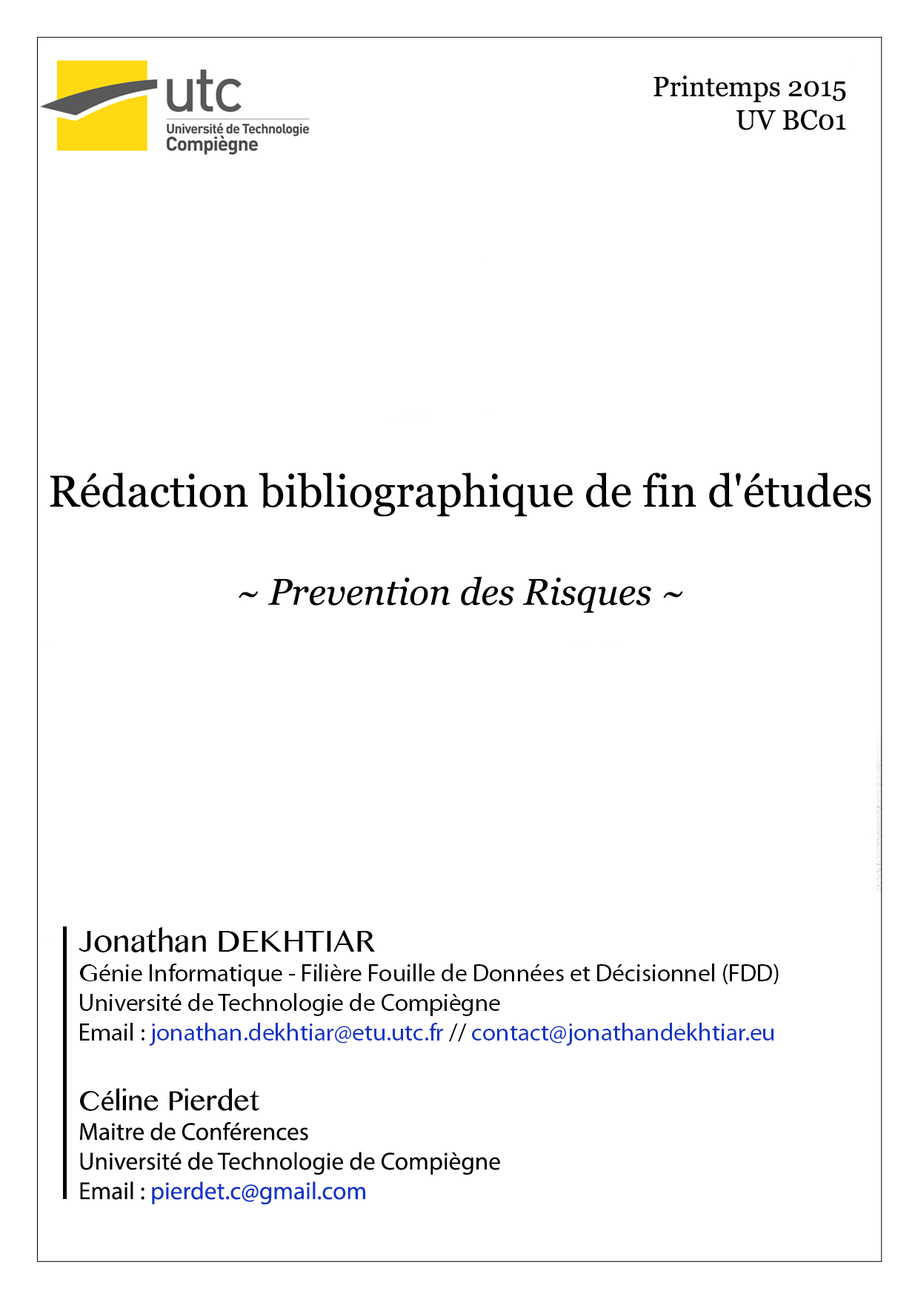
<style>
.page{position:relative;width:918px;height:1299px;background:#ffffff}
.page>*{position:absolute;margin:0}
.t1{font:27.8px "Georgia";color:#000000}
.t2{font:44.8px "Georgia";color:#000000}
.t3{font:37px "Georgia-Italic";color:#000000}
.t4{font:24.7px "MyriadPro-Regular";color:#000000}
.t5{font:30.9px "BanglaMN";color:#000000}
.t6{font:24.7px "BanglaMN";color:#000000}
.t7{font:24.7px "MyriadPro-Regular";color:#1234c5}
.t8{font:27.8px "BanglaMN";color:#000000}
.t9{font:27.8px "MyriadPro-Regular";color:#000000}
</style>
<div class="page">
<p class="t1" style="left:653px;top:76px;width:193px;height:54px;text-align:right">Printemps 2015<br>UV BC01</p>
<p class="t2" style="left:50px;top:473px;width:821px;height:140px;text-align:center">Rédaction bibliographique de fin d'études<br><br><span class="t3">~ Prevention des Risques ~</span></p>
<p class="t4" style="left:79px;top:927px;width:700px;height:119px"><span class="t5">Jonathan DEKHTIAR<br></span><span class="t6">G</span>énie Informatique - Filière Fouille de Données et Décisionnel (FDD)<br>Université de Technologie de Compiègne<br>Email : <span class="t7">jonathan.dekhtiar@etu.utc.fr </span>//<span class="t7"> contact@jonathandekhtiar.eu</span></p>
<p class="t4" style="left:79px;top:1088px;width:421px;height:117px"><span class="t8">C</span><span class="t9">é</span><span class="t8">line Pierdet<br></span>Maitre de Conférences<br>Université de Technologie de Compiègne<br>Email : <span class="t7">pierdet.c@gmail.com</span></p>
</div>
